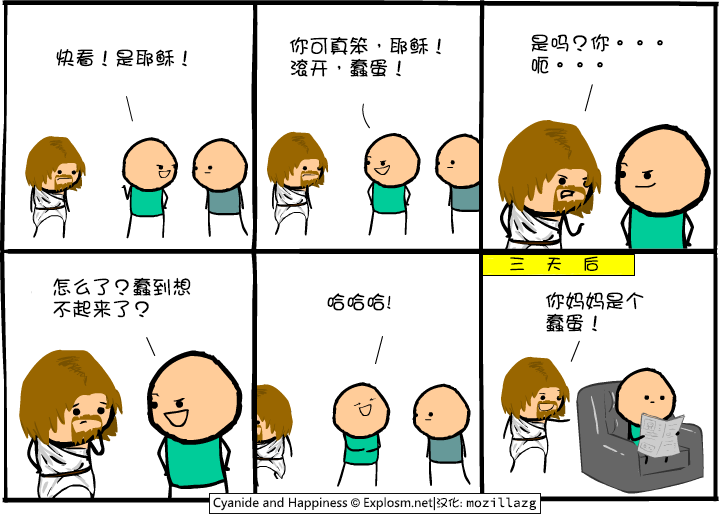
<style>
.page{position:relative;width:720px;height:515px;background:#ffffff}
.page>*{position:absolute;margin:0}
.t1{font:20px/22px "DFGirl";color:#000000}
.t2{font:20px "DFGirl";color:#000000}
.t3{font:17px "DFGirl";letter-spacing:1.18em;color:#000000}
</style>
<div class="page">
<p class="t1" style="left:289px;top:36px;width:152px;height:41px">你可真笨，耶稣！<br>滚开，蠢蛋！</p>
<p class="t1" style="left:531px;top:34px;width:132px;height:40px">是吗？你。。。<br>呃。。。</p>
<p class="t2" style="left:56px;top:49px;width:131px;height:18px">快看！是耶稣！</p>
<p class="t3" style="left:510px;top:256px;width:89px;height:16px">三天后</p>
<p class="t1" style="left:53px;top:277px;width:138px;height:41px">怎么了？蠢到想<br>不起来了？</p>
<p class="t2" style="left:327px;top:293px;width:64px;height:18px">哈哈哈!</p>
<p class="t1" style="left:545px;top:292px;width:99px;height:40px">你妈妈是个<br>蠢蛋！</p>
</div>
